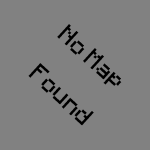
<style>
.page{position:relative;width:150px;height:150px;background:#818181}
.page>*{position:absolute;margin:0}
.t1{font:20px "Minecraft";color:#000000}
</style>
<div class="page">
<p class="t1" style="left:28px;top:24px;width:94px;height:102px;rotate:42deg">No Map<br><br> Found</p>
</div>
